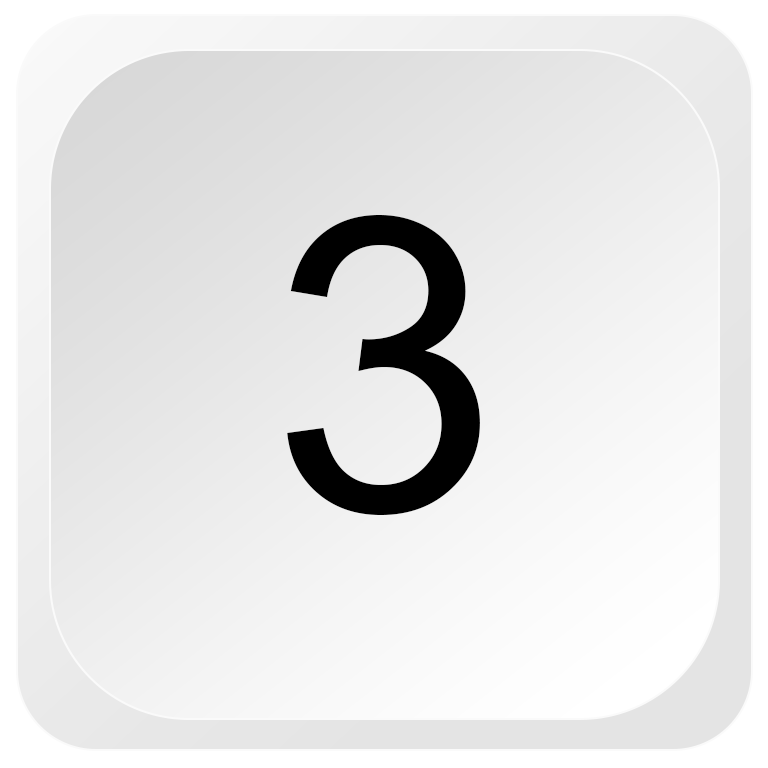
<style>
.page{position:relative;width:768px;height:768px}
.page>*{position:absolute;margin:0}
.t1{font:411px "ArialMT";color:#000000}
</style>
<div class="page">
<p class="t1" style="left:287px;top:215px;width:193px;height:300px">3</p>
</div>
